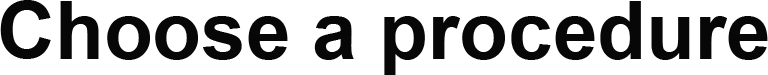
<style>
.page{position:relative;width:768px;height:75px;background:#ffffff}
.page>*{position:absolute;margin:0}
.t1{font:80px "Arial-BoldMT";color:#070707}
</style>
<div class="page">
<p class="t1" style="left:0px;top:0px;width:768px;height:75px">Choose a procedure</p>
</div>
